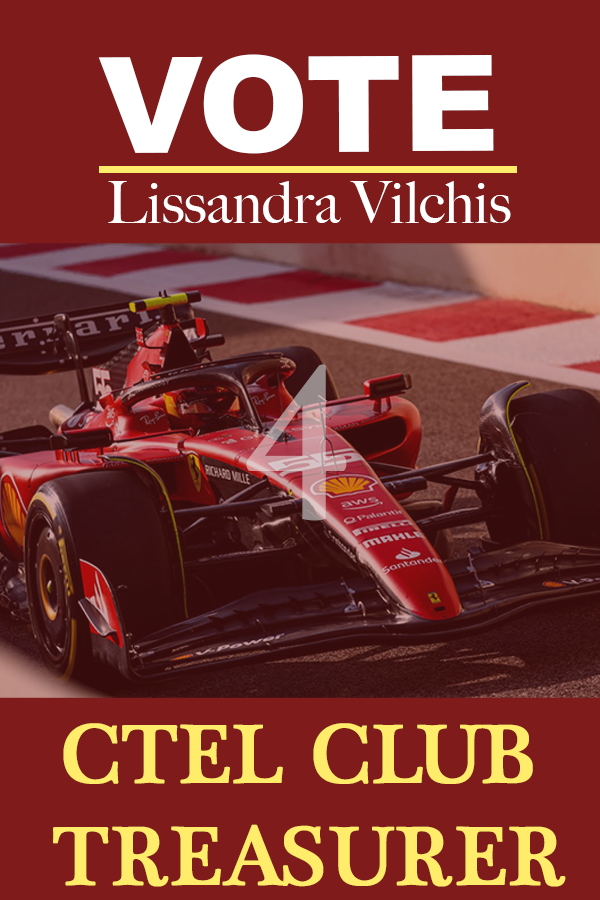
<style>
.page{position:relative;width:600px;height:900px;background:#801b1b}
.page>*{position:absolute;margin:0}
.t1{font:133.4px "Arial-Black";color:#ffffff}
.t2{font:231.9px "PlantagenetCherokee";font-weight:bold}
.t3{font:85.1px "PlantagenetCherokee";color:#ffec6a;font-weight:bold}
</style>
<div class="page">
<p class="t1" style="left:98px;top:54px;width:396px;height:100px">VOTE</p>
<p class="t2" style="left:246px;top:364px;width:101px;height:157px">4</p>
<p class="t3" style="left:53px;top:723px;width:513px;height:164px;text-align:center">CTEL CLUB<br> TREASURER</p>
</div>
